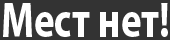
<style>
.page{position:relative;width:170px;height:40px;background:#333333}
.page>*{position:absolute;margin:0}
.t1{font:50px "MyriadPro-Bold";color:#ffffff;scale:0.78 1}
</style>
<div class="page">
<p class="t1" style="left:3px;top:3px;width:165px;height:34px">Мест нет!</p>
</div>
